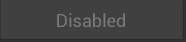
<style>
.page{position:relative;width:186px;height:42px;background:#404040}
.page>*{position:absolute;margin:0}
.t1{font:18px "Roboto-Regular";color:#7a7a7a}
</style>
<div class="page">
<p class="t1" style="left:57px;top:13px;width:68px;height:15px">Disabled</p>
</div>
